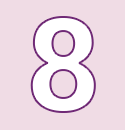
<style>
.page{position:relative;width:125px;height:130px;background:#f0dce5}
.page>*{position:absolute;margin:0}
.t1{font:129.9px "Roboto-Bold";color:#ffffff}
</style>
<div class="page">
<p class="t1" style="left:31px;top:17px;width:64px;height:95px">8</p>
</div>
